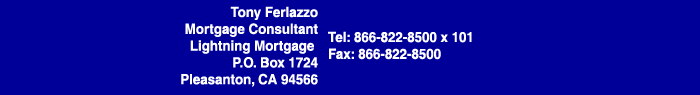
<style>
.page{position:relative;width:700px;height:95px;background:#000099}
.page>*{position:absolute;margin:0}
.t1{font:14px "Helvetica-Bold";color:#ffffff;scale:0.95 1}
</style>
<div class="page">
<p class="t1" style="left:181px;top:6px;width:137px;height:81px;text-align:right">Tony Ferlazzo<br>Mortgage Consultant<br>Lightning Mortgage <br>P.O. Box 1724<br>Pleasanton, CA 94566</p>
<p class="t1" style="left:328px;top:31px;width:144px;height:29px">Tel: 866-822-8500 x 101<br>Fax: 866-822-8500</p>
</div>
